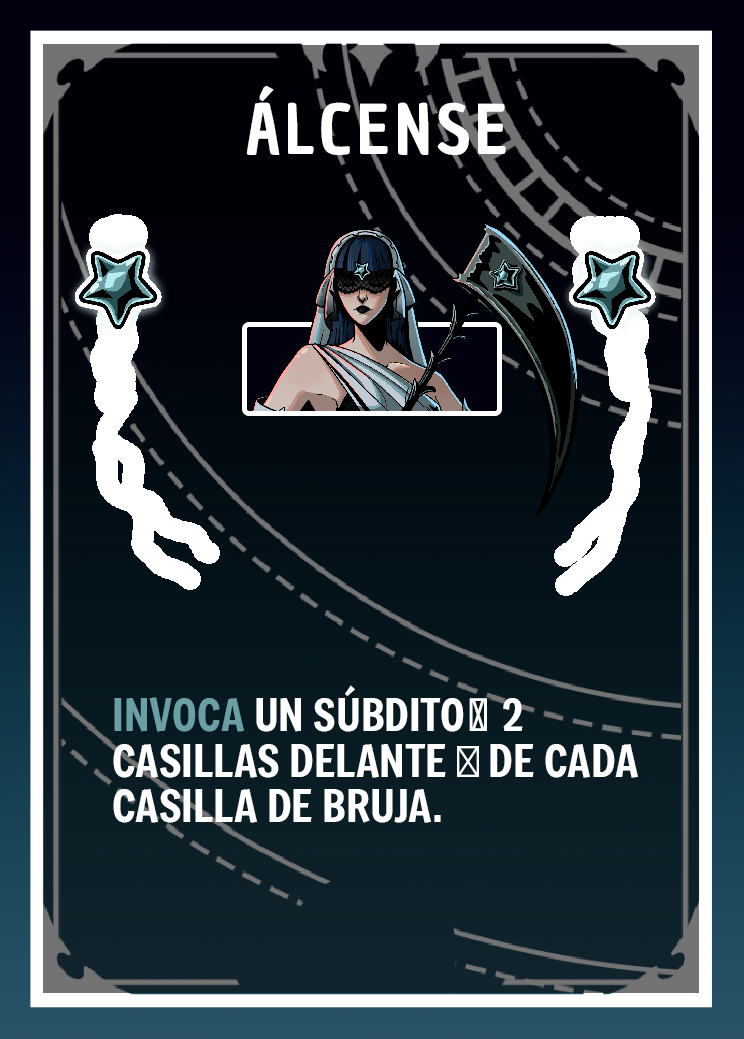
<style>
.page{position:relative;width:744px;height:1039px}
.page>*{position:absolute;margin:0}
.t1{font:66.7px "ChauPhilomeneOne-Regular";letter-spacing:0.075em;color:#ffffff}
.t2{font:43.7px/45.8px "Freeman-Regular";color:#ffffff}
.t3{font:43.7px/45.8px "Freeman-Regular";color:#6aa0a5}
.t4{font:43.7px/45.8px "MyriadPro-Regular";color:#ffffff}
</style>
<div class="page">
<p class="t1" style="left:246px;top:86px;width:260px;height:69px">ÁLCENSE</p>
<p class="t2" style="left:113px;top:685px;width:525px;height:138px"><span class="t3">INVOCA </span>UN SÚBDITO👾 2 CASILLAS DELANTE <span class="t4">⬆️</span> DE CADA CASILLA DE BRUJA.</p>
</div>
